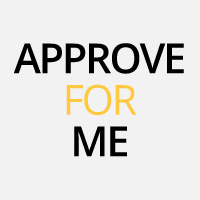
<style>
.page{position:relative;width:200px;height:200px;background:#f2f2f2}
.page>*{position:absolute;margin:0}
.t1{font:41.6px/41.4px "OpenSans-Semibold";letter-spacing:-0.05em;color:#000000}
.t2{font:41.6px/41.4px "OpenSans-Semibold";color:#000000}
.t3{font:41.6px/41.4px "OpenSans";letter-spacing:-0.05em;color:#ffc840}
.t4{font:41.6px/41.4px "OpenSans";color:#ffc840}
</style>
<div class="page">
<p class="t1" style="left:13px;top:43px;width:171px;height:114px;text-align:center">APPROV<span class="t2">E<br></span><span class="t3">FO</span><span class="t4">R<br></span>ME</p>
</div>
